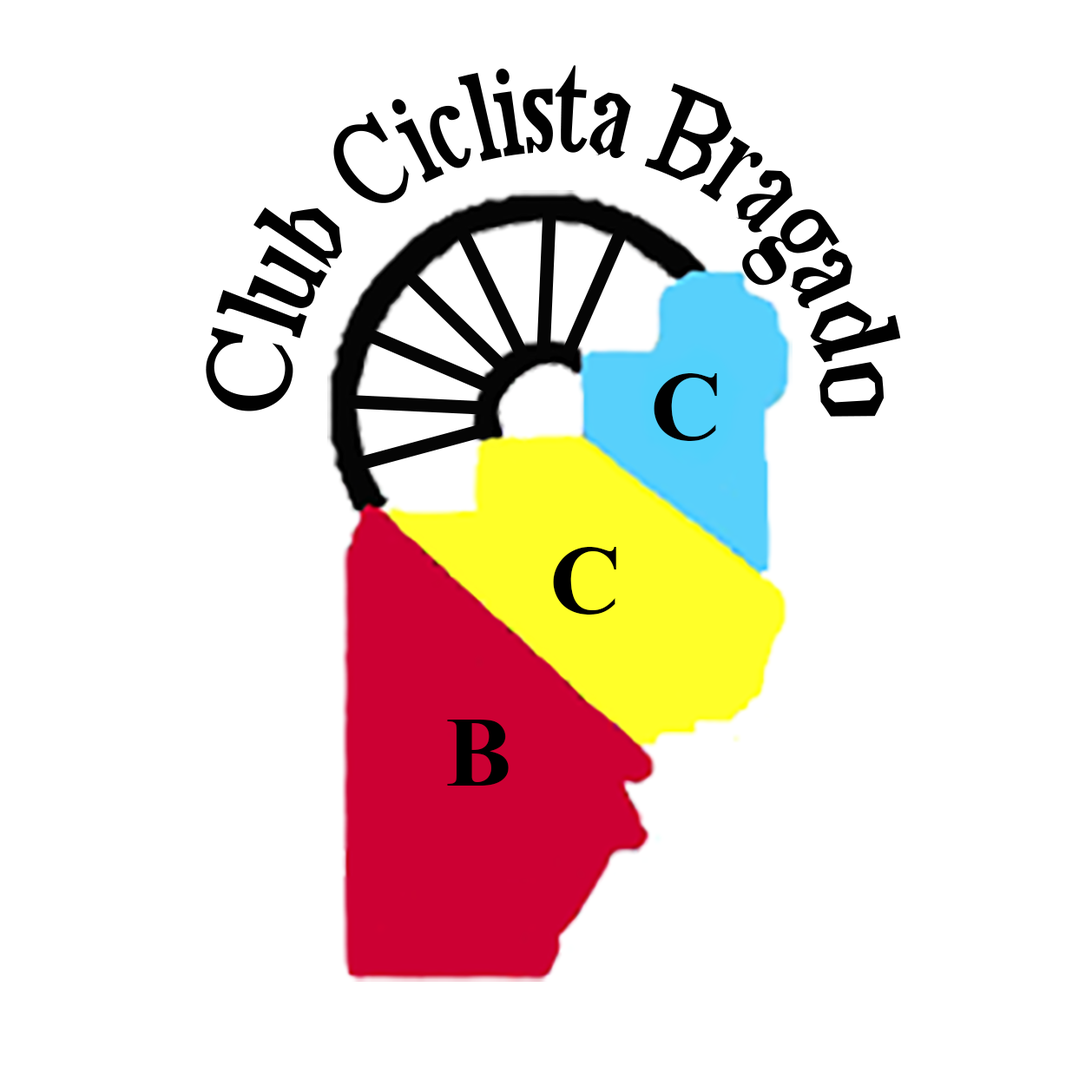
<style>
.page{position:relative;width:1092px;height:1092px;background:#ffffff}
.page>*{position:absolute;margin:0}
.t1{font:55.4px/0.4px "TimesNewRomanPS-BoldMT";color:#010101}
.t2{font:100px "TimesNewRomanPS-BoldMT";color:#010101}
.t3{font:100px "TimesNewRomanPS-BoldMT";color:#000000}
</style>
<div class="page">
<p class="t1" style="left:206px;top:65px;width:695px;height:352px;text-align:center">Club Ciclista Bragado</p>
<p class="t2" style="left:654px;top:373px;width:63px;height:68px">C</p>
<p class="t3" style="left:553px;top:547px;width:63px;height:68px">C</p>
<p class="t3" style="left:447px;top:720px;width:62px;height:66px">B</p>
</div>
